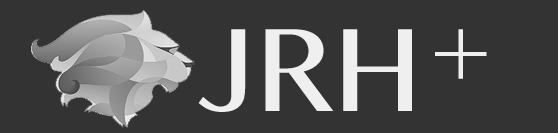
<style>
.page{position:relative;width:558px;height:133px;background:#333333}
.page>*{position:absolute;margin:0}
.t1{font:120px "GurmukhiMN";color:#f0efef}
.t2{font:100px "GurmukhiMN";color:#f0efef}
</style>
<div class="page">
<p class="t1" style="left:198px;top:29px;width:214px;height:83px">JRH</p>
<p class="t2" style="left:435px;top:29px;width:52px;height:50px">+</p>
</div>
